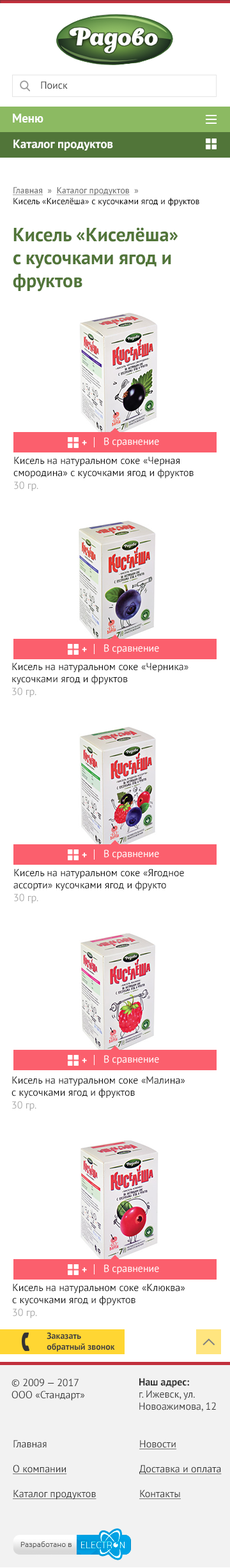
<style>
.page{position:relative;width:230px;height:1568px;background:#ffffff}
.page>*{position:absolute;margin:0}
.t1{font:10.2px "PTSans-Regular";color:#333333}
.t2{font:12.1px "PTSans-Bold";color:#ffffff}
.t3{font:8.9px "PTSans-Regular";color:#010101}
.t4{font:8.9px "PTSans-Regular";color:#666666;text-decoration:underline}
.t5{font:8.9px "PTSans-Regular";color:#666666}
.t6{font:19.1px "PTSans-Bold";color:#517539}
.t7{font:10.2px "PTSans-Regular";color:#ffffff}
.t8{font:10.2px "PTSans-Bold";color:#ffffff}
.t9{font:10.2px "PTSans-Regular";color:#111111}
.t10{font:10.2px "PTSans-Regular";color:#aaaaaa}
.t11{font:9px "PTSans-Bold";color:#3e3e3e}
.t12{font:10.2px "PTSans-Bold";color:#333333}
.t13{font:10.2px/24.9px "PTSans-Regular";color:#333333;text-decoration:underline}
.t14{font:10.2px/24.9px "PTSans-Regular";color:#333333}
</style>
<div class="page">
<p class="t1" style="left:41px;top:81px;width:27px;height:8px">Поиск</p>
<p class="t2" style="left:13px;top:114px;width:30px;height:9px">Меню</p>
<p class="t2" style="left:13px;top:139px;width:100px;height:12px">Каталог продуктов</p>
<p class="t3" style="left:13px;top:187px;width:186px;height:19px"><span class="t4">Главная</span><span class="t5">  »  </span><span class="t4">Каталог продуктов</span><span class="t5">  »</span>  <br>Кисель «Киселёша» с кусочками ягод и фруктов</p>
<p class="t6" style="left:13px;top:227px;width:165px;height:65px">Кисель «Киселёша» <br>с кусочками ягод и <br>фруктов</p>
<p class="t7" style="left:104px;top:437px;width:55px;height:10px">В сравнение</p>
<p class="t8" style="left:82px;top:440px;width:5px;height:5px">+</p>
<p class="t9" style="left:13px;top:456px;width:180px;height:35px">Кисель на натуральном соке «Черная смородина» с кусочками ягод и фруктов<br><span class="t10">30 гр.</span></p>
<p class="t8" style="left:82px;top:647px;width:5px;height:5px">+</p>
<p class="t7" style="left:104px;top:644px;width:55px;height:10px">В сравнение</p>
<p class="t9" style="left:12px;top:662px;width:176px;height:36px">Кисель на натуральном соке «Черника» кусочками ягод и фруктов<br><span class="t10">30 гр.</span></p>
<p class="t8" style="left:82px;top:853px;width:5px;height:5px">+</p>
<p class="t7" style="left:104px;top:849px;width:55px;height:11px">В сравнение</p>
<p class="t9" style="left:13px;top:869px;width:171px;height:35px">Кисель на натуральном соке «Ягодное ассорти» кусочками ягод и фрукто<br><span class="t10">30 гр.</span></p>
<p class="t8" style="left:82px;top:1058px;width:5px;height:5px">+</p>
<p class="t7" style="left:104px;top:1055px;width:55px;height:10px">В сравнение</p>
<p class="t9" style="left:11px;top:1076px;width:174px;height:35px">Кисель на натуральном соке «Малина» <br>с кусочками ягод и фруктов<br><span class="t10">30 гр.</span></p>
<p class="t7" style="left:104px;top:1264px;width:55px;height:10px">В сравнение</p>
<p class="t8" style="left:82px;top:1267px;width:5px;height:6px">+</p>
<p class="t9" style="left:12px;top:1283px;width:173px;height:35px">Кисель на натуральном соке «Клюква» <br>с кусочками ягод и фруктов<br><span class="t10">30 гр.</span></p>
<p class="t11" style="left:47px;top:1333px;width:68px;height:19px">Заказать <br>обратный звонок</p>
<p class="t1" style="left:11px;top:1378px;width:74px;height:23px">© 2009 — 2017<br>ООО «Стандарт»</p>
<p class="t1" style="left:139px;top:1378px;width:77px;height:34px"><span class="t12">Наш адрес:<br></span>г. Ижевск, ул. <br>Новоажимова, 12</p>
<p class="t13" style="left:13px;top:1440px;width:83px;height:60px"><span class="t14">Главная<br></span>О компании<br>Каталог продуктов</p>
<p class="t13" style="left:139px;top:1440px;width:82px;height:59px">Новости<br>Доставка и оплата<br>Контакты</p>
</div>
